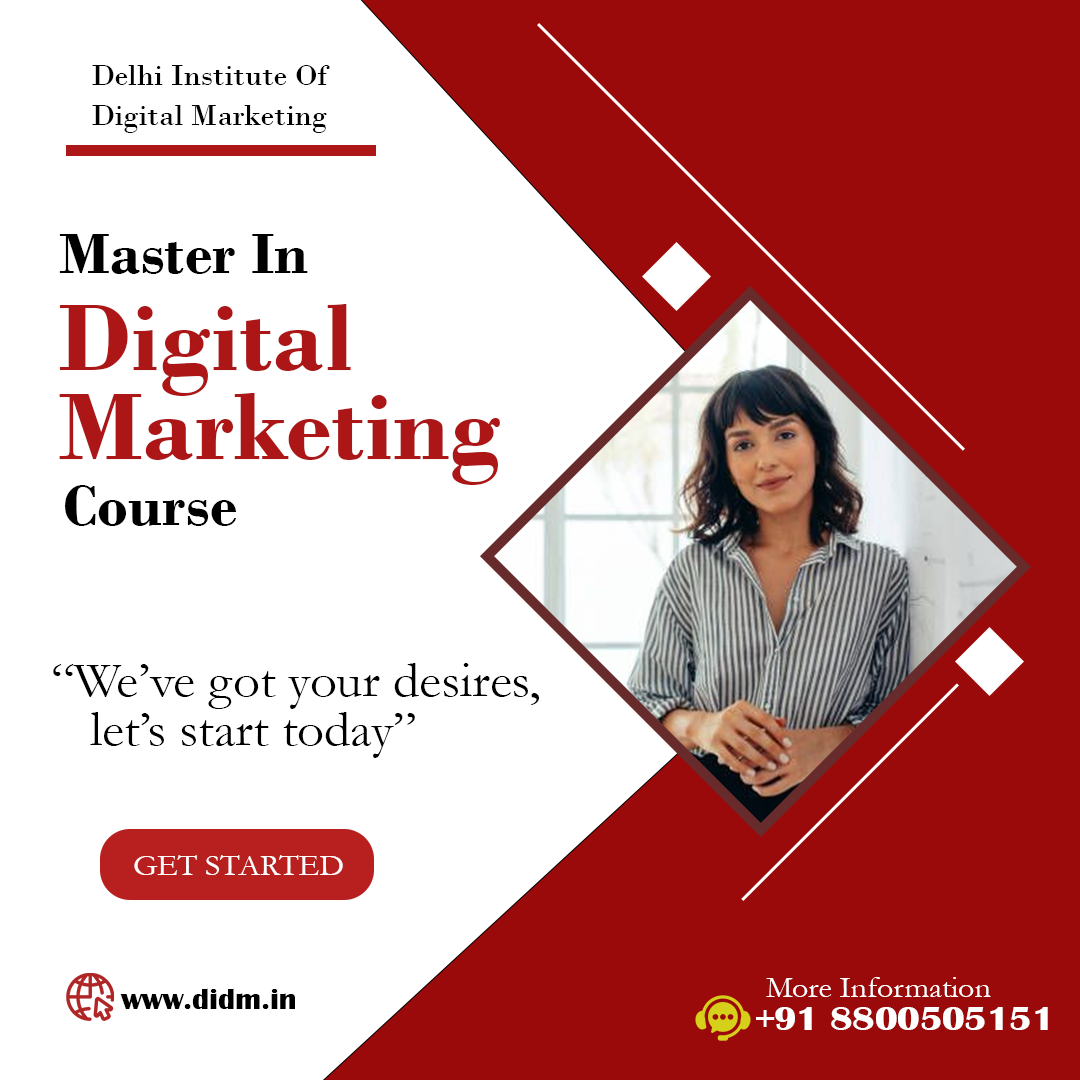
<style>
.page{position:relative;width:1080px;height:1080px;background:#ffffff}
.page>*{position:absolute;margin:0}
.t1{font:30px/40px "BodoniMT";color:#000000;scale:1.05 1}
.t2{font:60px "BodoniMT-Bold";color:#000000;scale:1.05 1}
.t3{font:100px/89px "BodoniMT-Bold";color:#ad1616;scale:1.05 1}
.t4{font:50px/49px "Garamond";color:#000000;scale:1.05 1}
.t5{font:30px "Garamond";color:#ffffff;scale:1.05 1}
.t6{font:30px "BritannicBold";color:#000000;scale:1.05 1}
.t7{font:35px "BritannicBold";color:#ffffff;scale:1.05 1}
</style>
<div class="page">
<p class="t1" style="left:92px;top:65px;width:238px;height:68px">Delhi Institute Of<br>Digital Marketing</p>
<p class="t2" style="left:59px;top:234px;width:249px;height:40px">Master In</p>
<p class="t3" style="left:59px;top:304px;width:441px;height:181px">Digital <br>Marketing</p>
<p class="t2" style="left:65px;top:485px;width:172px;height:41px">Course</p>
<p class="t4" style="left:53px;top:663px;width:486px;height:95px">“We’ve got your desires,<br>   let’s start today”</p>
<p class="t5" style="left:134px;top:855px;width:209px;height:20px">GET STARTED</p>
<p class="t5" style="left:766px;top:977px;width:225px;height:20px">More Information</p>
<p class="t6" style="left:120px;top:988px;width:175px;height:21px">www.didm.in</p>
<p class="t7" style="left:756px;top:1007px;width:292px;height:23px">+91 8800505151</p>
</div>
